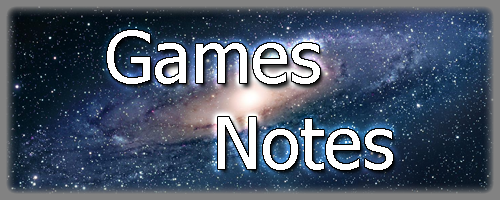
<style>
.page{position:relative;width:500px;height:200px}
.page>*{position:absolute;margin:0}
.t1{font:72px "Tahoma";color:#ffffff}
</style>
<div class="page">
<p class="t1" style="left:107px;top:30px;width:286px;height:140px">Games<br>   Notes</p>
<p class="t1" style="left:107px;top:30px;width:286px;height:140px">Games<br>   Notes</p>
</div>
